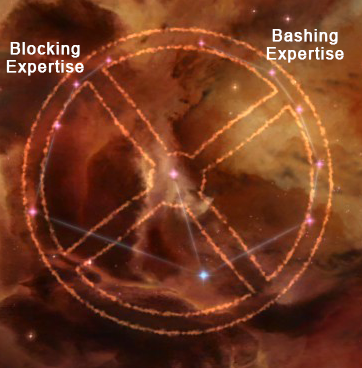
<style>
.page{position:relative;width:362px;height:368px}
.page>*{position:absolute;margin:0}
.t1{font:16px/18px "ArialMT";letter-spacing:0.06em;color:#ffffff;font-weight:bold}
</style>
<div class="page">
<p class="t1" style="left:266px;top:29px;width:78px;height:34px;text-align:center">Bashing<br>Expertise</p>
<p class="t1" style="left:6px;top:42px;width:78px;height:34px;text-align:center">Blocking<br>Expertise</p>
</div>
